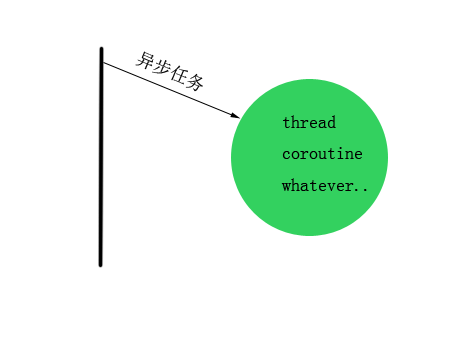
<style>
.page{position:relative;width:454px;height:340px;background:#ffffff}
.page>*{position:absolute;margin:0}
.t1{font:18px "SimSun";color:#000000}
</style>
<div class="page">
<p class="t1" style="left:135px;top:51px;width:68px;height:41px;rotate:23deg">异步任务</p>
<p class="t1" style="left:281px;top:115px;width:86px;height:76px">thread<br>coroutine<br>whatever..</p>
</div>
